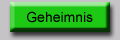
<style>
.page{position:relative;width:120px;height:40px;background:#1ec915}
.page>*{position:absolute;margin:0}
.t1{font:14px "ArialMT";color:#000000}
</style>
<div class="page">
<p class="t1" style="left:27px;top:11px;width:66px;height:12px">Geheimnis</p>
</div>
